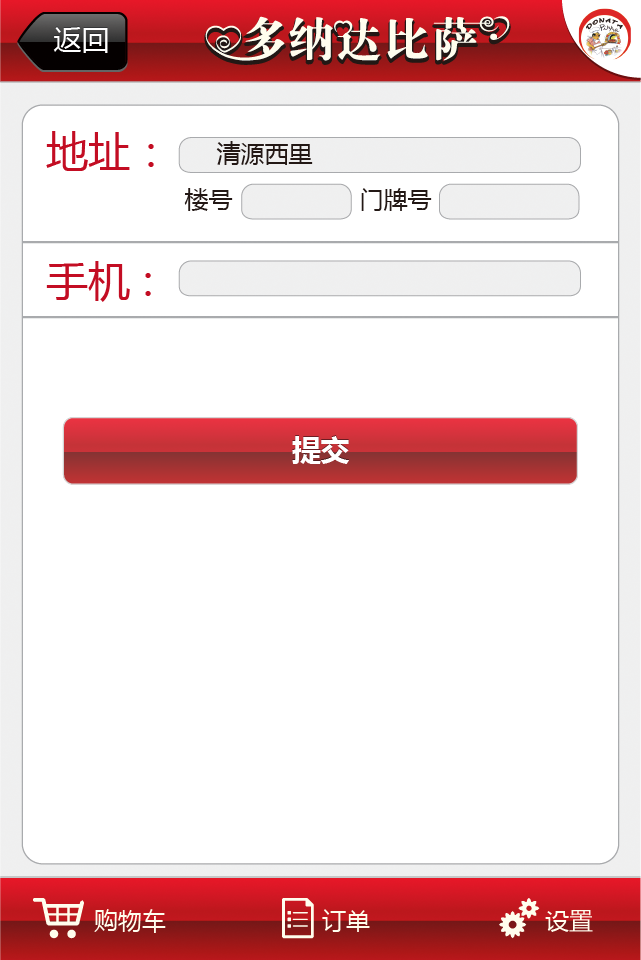
<style>
.page{position:relative;width:641px;height:960px;background:#ffffff}
.page>*{position:absolute;margin:0}
.t1{font:28px "MicrosoftYaHei"}
.t2{font:28px "MicrosoftYaHei";color:#ffffff}
.t3{font:42px "MicrosoftYaHei";color:#c30d23}
.t4{font:24px "MicrosoftYaHei";color:#231815}
.t5{font:28.7px "MicrosoftYaHei-Bold";color:#ffffff}
.t6{font:24px "MicrosoftYaHei";color:#fffeee}
</style>
<div class="page">
<p class="t1" style="left:53px;top:26px;width:55px;height:26px">返回</p>
<p class="t2" style="left:53px;top:27px;width:55px;height:26px">返回</p>
<p class="t3" style="left:46px;top:131px;width:108px;height:40px">地址：</p>
<p class="t4" style="left:216px;top:141px;width:97px;height:24px">清源西里</p>
<p class="t4" style="left:184px;top:188px;width:49px;height:23px">楼号</p>
<p class="t4" style="left:361px;top:188px;width:71px;height:23px">门牌号</p>
<p class="t3" style="left:46px;top:261px;width:105px;height:41px">手机 :</p>
<p class="t5" style="left:292px;top:435px;width:57px;height:28px">提交</p>
<p class="t5" style="left:292px;top:436px;width:57px;height:28px">提交</p>
<p class="t6" style="left:94px;top:909px;width:72px;height:24px">购物车</p>
<p class="t6" style="left:322px;top:909px;width:48px;height:23px">订单</p>
<p class="t6" style="left:545px;top:910px;width:48px;height:22px">设置</p>
</div>
